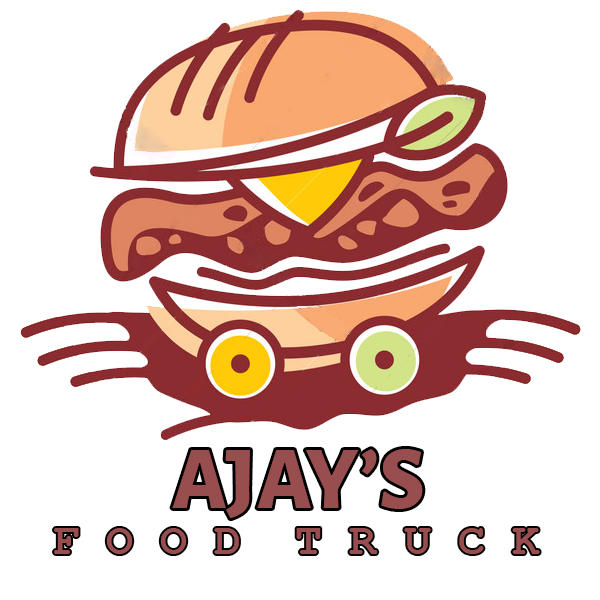
<style>
.page{position:relative;width:600px;height:600px;background:#ffffff}
.page>*{position:absolute;margin:0}
.t1{font:90px "AlegreyaSans-ExtraBold";color:#984e4e}
.t2{font:45px "CourierNewPS-BoldMT";color:#984e4e}
</style>
<div class="page">
<p class="t1" style="left:172px;top:449px;width:251px;height:70px">AJAY’S</p>
<p class="t2" style="left:54px;top:528px;width:486px;height:26px">F O O D  T R U C K</p>
</div>
